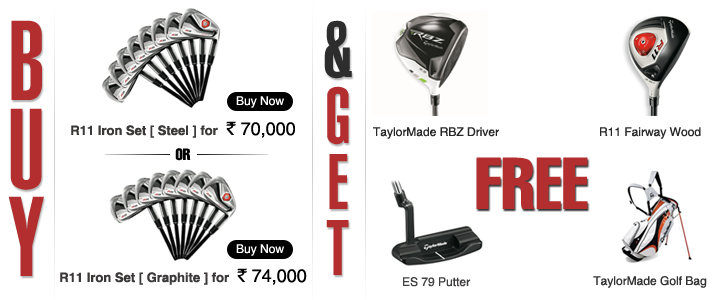
<style>
.page{position:relative;width:720px;height:300px;background:#ffffff}
.page>*{position:absolute;margin:0}
.t1{font:111.2px/88px "HelveticaLT-UltraCompressed";color:#b22e2f}
.t2{font:77.2px/66px "HelveticaLT-UltraCompressed";color:#b22e2f}
.t3{font:77.2px/66px "HelveticaLT-UltraCompressed";color:#2d2d2d}
.t4{font:12px "HelveticaLTStd-Roman";color:#fefefe}
.t5{font:13px "HelveticaLTStd-Bold";color:#3b3838}
.t6{font:18px "RupeeForadian";color:#010101}
.t7{font:18px "HelveticaLTStd-Roman";color:#010101}
.t8{font:12px "HelveticaLTStd-Roman";color:#282828}
.t9{font:16px "HelveticaLT-Compressed";color:#000000}
.t10{font:72px "HelveticaLT-Compressed";color:#b22e2f}
.t11{font:18px "RupeeForadian";color:#000000}
.t12{font:18px "HelveticaLTStd-Roman";color:#000000}
.t13{font:12px "HelveticaLTStd-Roman";color:#424040}
.t14{font:12px "HelveticaLTStd-Roman";color:#323232}
</style>
<div class="page">
<p class="t1" style="left:8px;top:20px;width:36px;height:256px;text-align:center">B<br>U<br>Y</p>
<p class="t2" style="left:324px;top:20px;width:28px;height:255px;text-align:center"><span class="t3">&amp;<br></span>G<br>E<br>T</p>
<p class="t4" style="left:236px;top:96px;width:48px;height:12px">Buy Now</p>
<p class="t5" style="left:71px;top:121px;width:224px;height:17px">R11 Iron Set [ Steel ] for  <span class="t6">`</span><span class="t7"> 70,000</span></p>
<p class="t8" style="left:373px;top:127px;width:126px;height:12px">TaylorMade RBZ Driver</p>
<p class="t8" style="left:600px;top:127px;width:101px;height:12px">R11 Fairway Wood</p>
<p class="t9" style="left:175px;top:148px;width:16px;height:13px">OR</p>
<p class="t10" style="left:476px;top:157px;width:112px;height:52px">FREE</p>
<p class="t4" style="left:236px;top:244px;width:48px;height:12px">Buy Now</p>
<p class="t5" style="left:60px;top:268px;width:247px;height:17px">R11 Iron Set [ Graphite ] for  <span class="t11">`</span><span class="t12"> 74,000</span></p>
<p class="t13" style="left:403px;top:277px;width:68px;height:10px">ES 79 Putter</p>
<p class="t14" style="left:593px;top:276px;width:114px;height:12px">TaylorMade Golf Bag</p>
</div>
